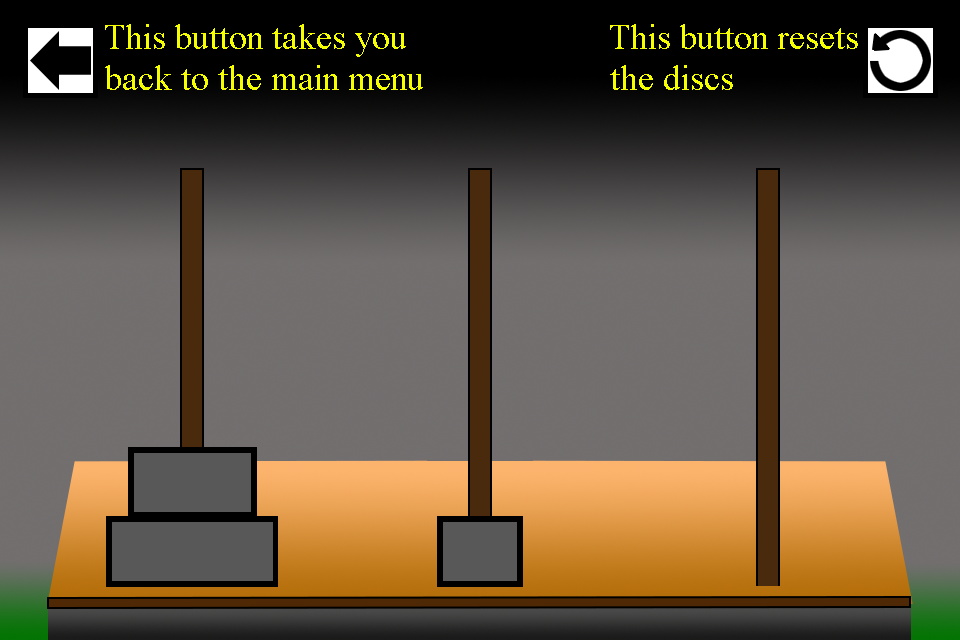
<style>
.page{position:relative;width:960px;height:640px}
.page>*{position:absolute;margin:0}
.t1{font:36px "TimesNewRomanPSMT";color:#f6ff00}
</style>
<div class="page">
<p class="t1" style="left:105px;top:24px;width:301px;height:33px">This button takes you</p>
<p class="t1" style="left:610px;top:24px;width:248px;height:25px">This button resets</p>
<p class="t1" style="left:105px;top:65px;width:318px;height:25px">back to the main menu</p>
<p class="t1" style="left:610px;top:65px;width:123px;height:25px">the discs</p>
</div>
